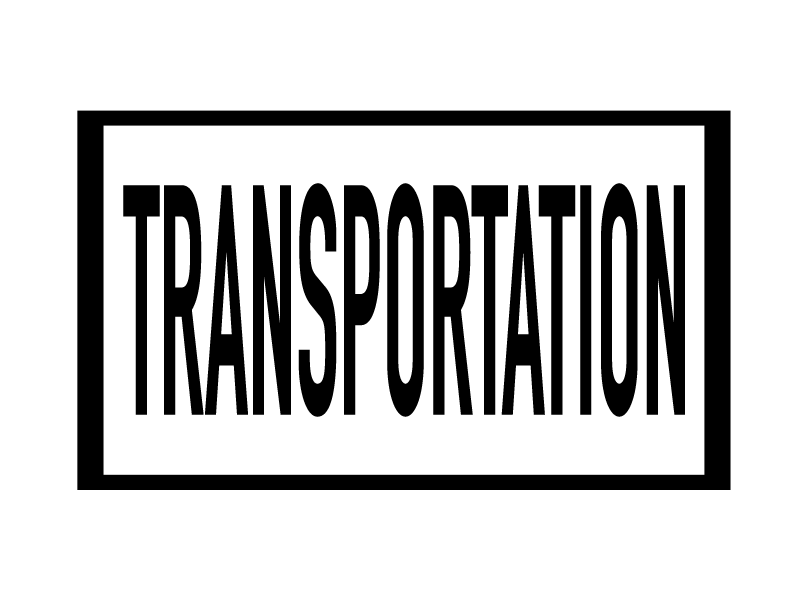
<style>
.page{position:relative;width:800px;height:600px;background:#ffffff}
.page>*{position:absolute;margin:0}
.t1{font:322.1px "DINEngschrift-Alternate";color:#000000;scale:0.33 1}
</style>
<div class="page">
<p class="t1" style="left:123px;top:183px;width:562px;height:234px">TRANSPORTATION</p>
</div>
